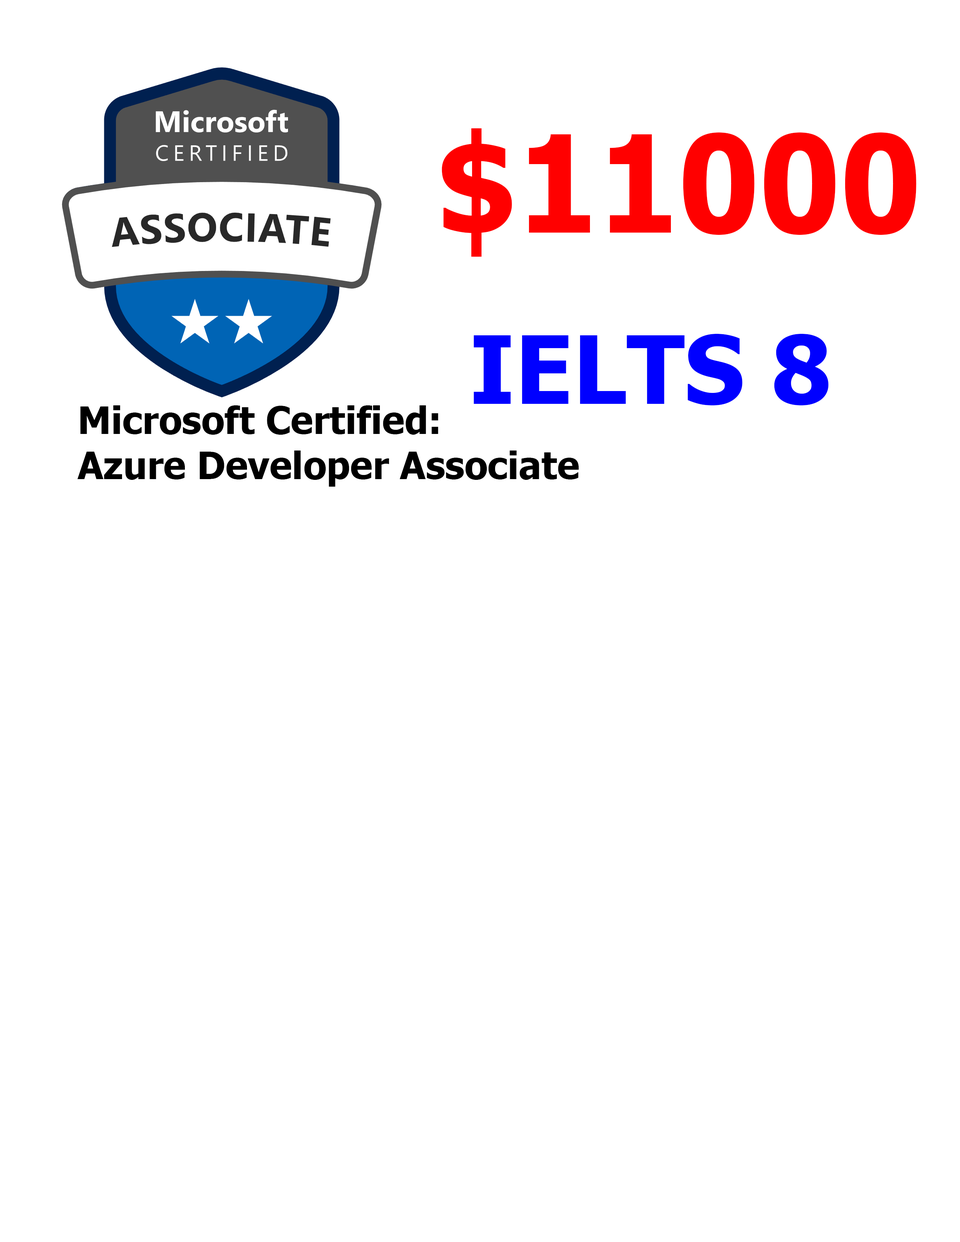
<style>
.page{position:relative;width:960px;height:1242px;background:#ffffff}
.page>*{position:absolute;margin:0}
.t1{font:135px "Tahoma-Bold";color:#ff0000;scale:0.94 1}
.t2{font:94.1px "Tahoma-Bold";color:#0000ff}
.t3{font:37.6px "Tahoma-Bold";color:#000000}
</style>
<div class="page">
<p class="t1" style="left:442px;top:128px;width:474px;height:129px">$11000</p>
<p class="t2" style="left:474px;top:334px;width:355px;height:71px">IELTS 8</p>
<p class="t3" style="left:77px;top:405px;width:502px;height:82px">Microsoft Certified: <br>Azure Developer Associate</p>
</div>
